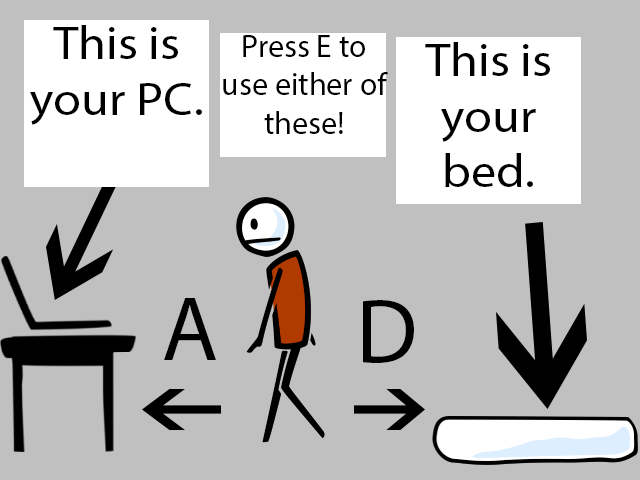
<style>
.page{position:relative;width:640px;height:480px;background:#c0c0c0}
.page>*{position:absolute;margin:0}
.t1{font:46.4px "MyriadPro-Regular";color:#000000;scale:1.09 1}
.t2{font:32px "MyriadPro-Regular";color:#000000}
.t3{font:92px "MyriadPro-Regular";color:#000000}
</style>
<div class="page">
<p class="t1" style="left:30px;top:25px;width:172px;height:100px;text-align:center">This is your PC.<br><br>Press E to sleep.</p>
<p class="t2" style="left:223px;top:35px;width:165px;height:99px;text-align:center">Press E to use either of these!</p>
<p class="t1" style="left:425px;top:42px;width:125px;height:145px;text-align:center">This is your bed.<br>Press E to sleep.</p>
<p class="t3" style="left:164px;top:298px;width:52px;height:62px">A</p>
<p class="t3" style="left:363px;top:300px;width:51px;height:63px">D</p>
</div>
